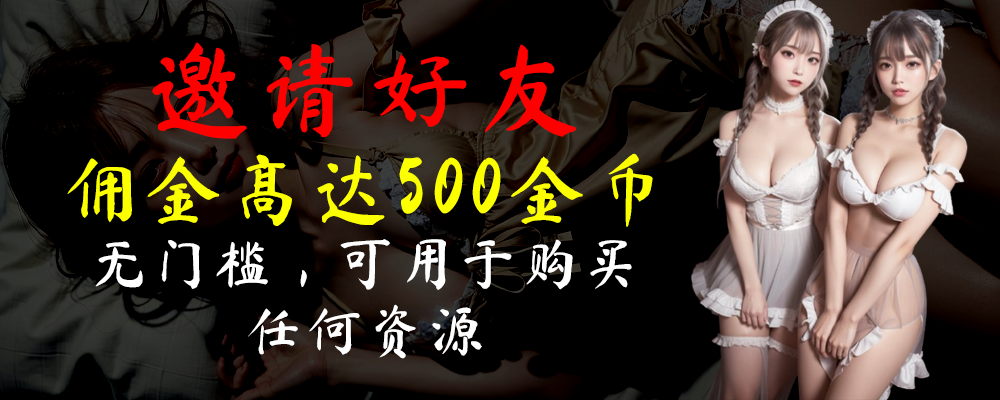
<style>
.page{position:relative;width:1000px;height:400px;background:#000000}
.page>*{position:absolute;margin:0}
.t1{font:55.9px "MaShanZheng-Regular";letter-spacing:0.1em;color:#ffffff}
.t2{font:100.3px "MaShanZheng-Regular";letter-spacing:0.1em;color:#ff0000}
.t3{font:76.1px "MaShanZheng-Regular";letter-spacing:0.1em;color:#fcff00}
</style>
<div class="page">
<p class="t1" style="left:67px;top:42px;width:586px;height:317px;text-align:center"><span class="t2">邀请好友<br></span><span class="t3">佣金高达500金币<br></span>无门槛，可用于购买<br>任何资源</p>
</div>
